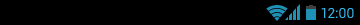
<style>
.page{position:relative;width:360px;height:25px;background:#000000}
.page>*{position:absolute;margin:0}
.t1{font:14px "Roboto-Regular";color:#33b5e5}
</style>
<div class="page">
<p class="t1" style="left:321px;top:8px;width:33px;height:10px">12:00</p>
</div>
